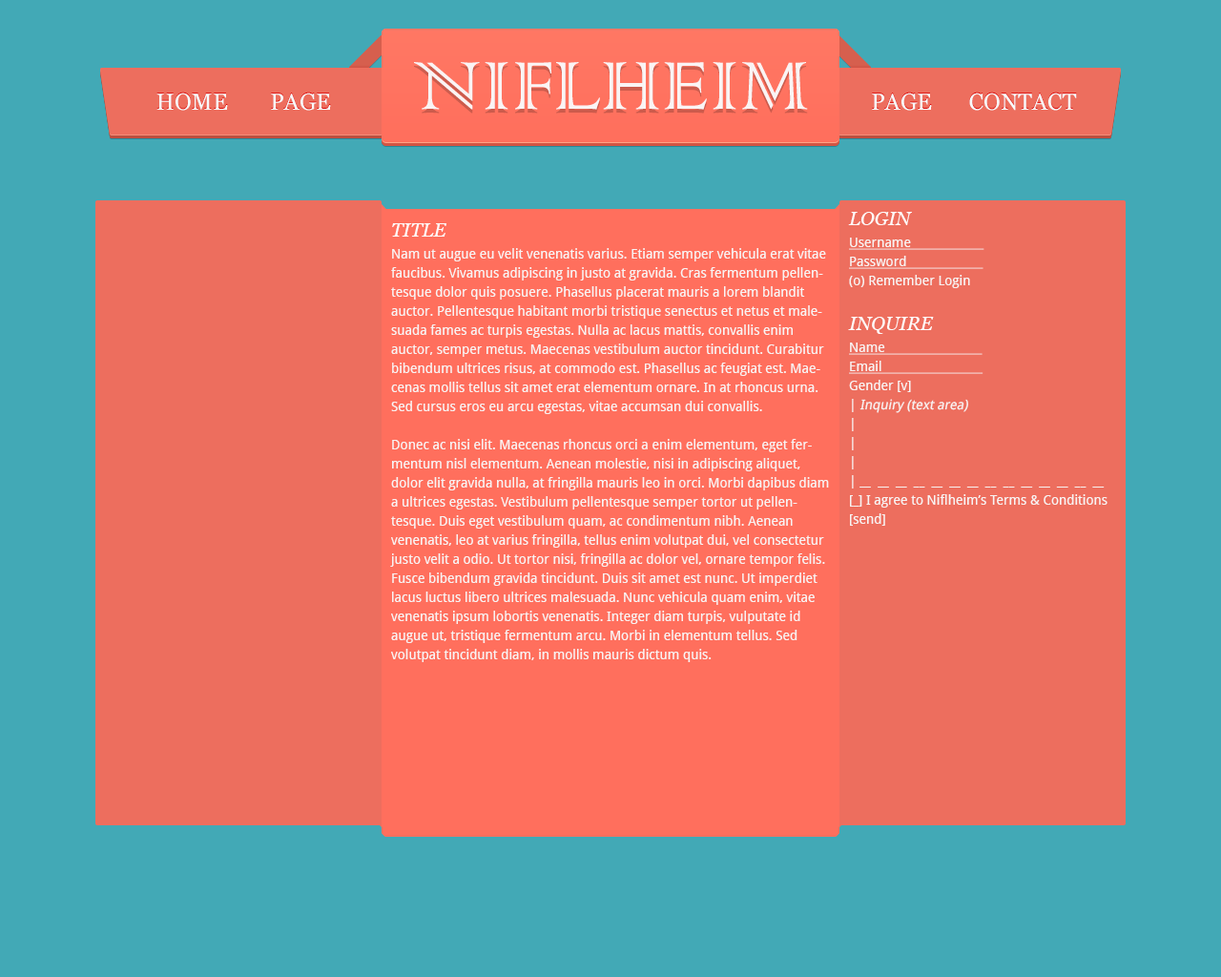
<style>
.page{position:relative;width:1221px;height:977px;background:#42a9b6}
.page>*{position:absolute;margin:0}
.t1{font:89.7px "ColonnaMT";color:#faf4f4}
.t2{font:22.9px "Georgia";color:#f8fcfd}
.t3{font:19.1px "Georgia-Italic";color:#fefaf9}
.t4{font:13.4px/19.1px "DroidSans";color:#f8f3f2;text-decoration:underline}
.t5{font:13.4px/19.1px "DroidSans";color:#f8f3f2}
.t6{font:13.4px/19.1px "DroidSans";color:#f8f3f2;font-style:italic}
</style>
<div class="page">
<p class="t1" style="left:414px;top:62px;width:394px;height:48px">NIFLHEIM</p>
<p class="t2" style="left:156px;top:93px;width:72px;height:18px">HOME</p>
<p class="t2" style="left:271px;top:93px;width:60px;height:18px">PAGE</p>
<p class="t2" style="left:872px;top:93px;width:60px;height:18px">PAGE</p>
<p class="t2" style="left:969px;top:93px;width:108px;height:18px">CONTACT</p>
<p class="t3" style="left:848px;top:212px;width:64px;height:13px">LOGIN</p>
<p class="t3" style="left:392px;top:223px;width:54px;height:14px">TITLE</p>
<p class="t4" style="left:849px;top:237px;width:135px;height:51px">Username                     <br>Password                      <br><span class="t5">(o) Remember Login</span></p>
<p class="t5" style="left:390px;top:248px;width:439px;height:414px">Nam ut augue eu velit venenatis varius. Etiam semper vehicula erat vitae faucibus. Vivamus adipiscing in justo at gravida. Cras fermentum pellentesque dolor quis posuere. Phasellus placerat mauris a lorem blandit auctor. Pellentesque habitant morbi tristique senectus et netus et malesuada fames ac turpis egestas. Nulla ac lacus mattis, convallis enim auctor, semper metus. Maecenas vestibulum auctor tincidunt. Curabitur bibendum ultrices risus, at commodo est. Phasellus ac feugiat est. Maecenas mollis tellus sit amet erat elementum ornare. In at rhoncus urna. Sed cursus eros eu arcu egestas, vitae accumsan dui convallis.<br><br>Donec ac nisi elit. Maecenas rhoncus orci a enim elementum, eget fermentum nisl elementum. Aenean molestie, nisi in adipiscing aliquet, dolor elit gravida nulla, at fringilla mauris leo in orci. Morbi dapibus diam a ultrices egestas. Vestibulum pellentesque semper tortor ut pellentesque. Duis eget vestibulum quam, ac condimentum nibh. Aenean venenatis, leo at varius fringilla, tellus enim volutpat dui, vel consectetur justo velit a odio. Ut tortor nisi, fringilla ac dolor vel, ornare tempor felis. Fusce bibendum gravida tincidunt. Duis sit amet est nunc. Ut imperdiet lacus luctus libero ultrices malesuada. Nunc vehicula quam enim, vitae venenatis ipsum lobortis venenatis. Integer diam turpis, vulputate id augue ut, tristique fermentum arcu. Morbi in elementum tellus. Sed volutpat tincidunt diam, in mollis mauris dictum quis.</p>
<p class="t3" style="left:848px;top:317px;width:86px;height:17px">INQUIRE</p>
<p class="t5" style="left:849px;top:342px;width:258px;height:184px"><span class="t4">Name                            <br>Email                             <br></span>Gender [v]<br>| <span class="t6">Inquiry (text area)<br></span>|<br>|<br>|<br>| __  __  __  __  __  __  __  __  __  __  __  __  __  __<br>[_] I agree to Niflheim’s Terms &amp; Conditions<br>[send]</p>
</div>
